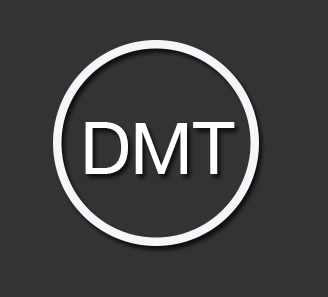
<style>
.page{position:relative;width:328px;height:297px;background:#333333}
.page>*{position:absolute;margin:0}
.t1{font:72px "HelveticaNeue";color:#ffffff}
</style>
<div class="page">
<p class="t1" style="left:85px;top:122px;width:150px;height:52px">DMT</p>
</div>
